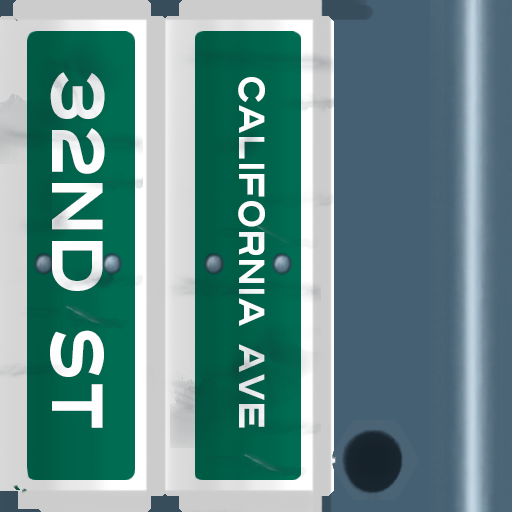
<style>
.page{position:relative;width:512px;height:512px}
.page>*{position:absolute;margin:0}
.t1{font:72px "Turnpike";color:#fefeff;scale:0.75 1}
.t2{font:36px "Turnpike";color:#fefeff;scale:0.75 1}
</style>
<div class="page">
<p class="t1" style="left:50px;top:72px;width:55px;height:356px;rotate:90deg">32nd st</p>
<p class="t2" style="left:238px;top:77px;width:27px;height:351px;rotate:90deg">california ave</p>
</div>
